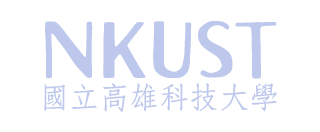
<style>
.page{position:relative;width:320px;height:132px;background:#ffffff}
.page>*{position:absolute;margin:0}
.t1{font:80px "AveraSansTC-Regular";color:#bdc8ec}
.t2{font:30px "JetLink-BoldPseudoSong";color:#bdc8ec}
</style>
<div class="page">
<p class="t1" style="left:45px;top:21px;width:232px;height:58px">NKUST</p>
<p class="t2" style="left:44px;top:83px;width:233px;height:29px">國立高雄科技大學</p>
</div>
